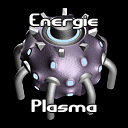
<style>
.page{position:relative;width:128px;height:128px;background:#000000}
.page>*{position:absolute;margin:0}
.t1{font:18px "GravitateBRK";color:#ffffff}
</style>
<div class="page">
<p class="t1" style="left:29px;top:13px;width:69px;height:16px">Energie</p>
<p class="t1" style="left:31px;top:99px;width:66px;height:13px">Plasma</p>
</div>
